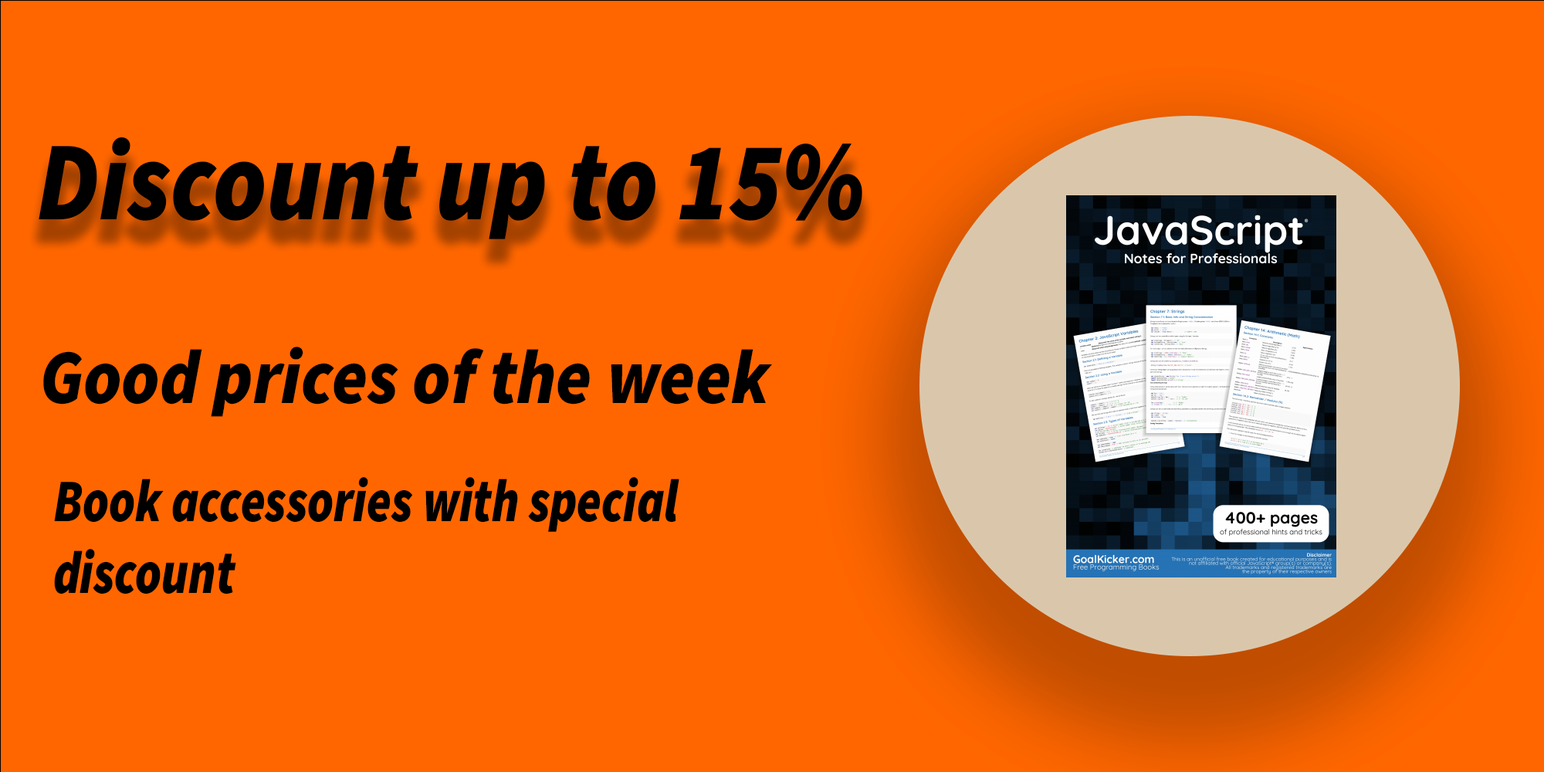
<style>
.page{position:relative;width:1544px;height:772px;background:#ff6600}
.page>*{position:absolute;margin:0}
.t1{font:112.6px "SourceSans3Italic-BlackItalic";color:#000000;scale:0.89 1}
.t2{font:77.2px "SourceSans3Italic-BlackItalic";color:#000000;scale:0.92 1}
.t3{font:60.2px "SourceSans3Italic-BlackItalic";color:#000000;scale:0.81 1}
</style>
<div class="page">
<p class="t1" style="left:39px;top:137px;width:823px;height:102px">%15 Discount up to</p>
<p class="t2" style="left:43px;top:347px;width:729px;height:70px">Good prices of the week</p>
<p class="t3" style="left:54px;top:477px;width:625px;height:118px;text-align:right">Book accessories with special discount</p>
</div>
